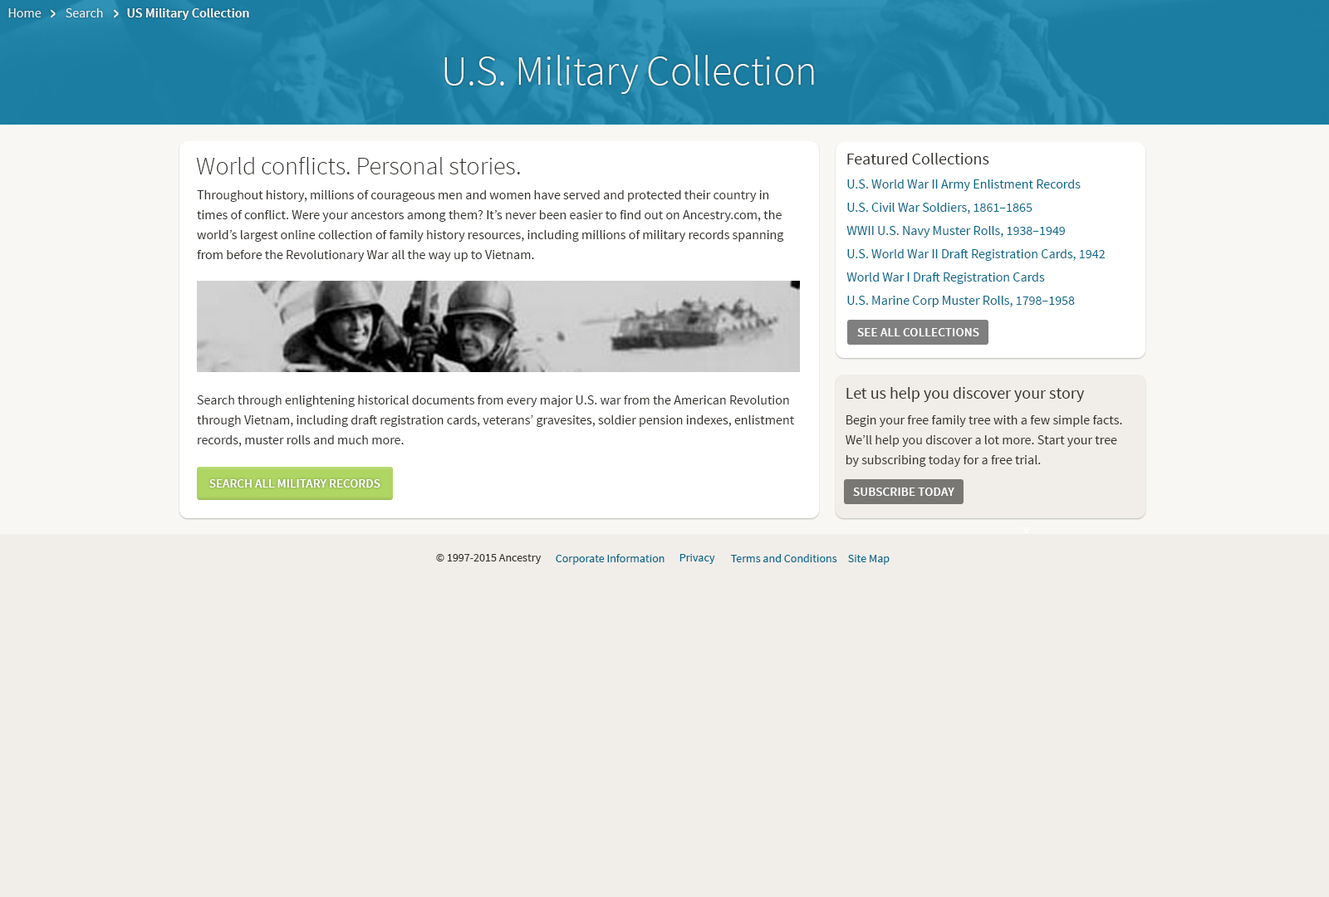
<style>
.page{position:relative;width:1329px;height:897px;background:#f1eeea}
.page>*{position:absolute;margin:0}
.t1{font:13.3px "SourceSansPro-Regular";color:#f8f7f3}
.t2{font:13.3px "SourceSansPro-Semibold";color:#f8f7f3}
.t3{font:41.5px "SourceSansPro-Light";color:#f8f7f3}
.t4{font:24.9px "SourceSansPro-Light";color:#36322d}
.t5{font:16.6px "SourceSansPro-Regular";color:#36322d}
.t6{font:13.3px/19.9px "SourceSansPro-Regular";color:#03678b}
.t7{font:13.3px/19.9px "SourceSansPro-Regular";color:#36322d}
.t8{font:12.5px "SourceSansPro-Semibold";letter-spacing:0.01em;color:#ffffff}
.t9{font:12.5px "SourceSansPro-Semibold";color:#ffffff}
.t10{font:11.6px "SourceSansPro-Regular";color:#36322d}
.t11{font:11.6px "SourceSansPro-Regular";color:#03678b}
</style>
<div class="page">
<p class="t1" style="left:8px;top:8px;width:34px;height:9px;opacity:0.9">Home</p>
<p class="t1" style="left:66px;top:8px;width:37px;height:9px;opacity:0.9">Search</p>
<p class="t2" style="left:127px;top:8px;width:122px;height:12px">US Military Collection</p>
<p class="t3" style="left:444px;top:55px;width:370px;height:39px">U.S. Military Collection</p>
<p class="t4" style="left:196px;top:157px;width:324px;height:17px">World conflicts. Personal stories.</p>
<p class="t5" style="left:847px;top:153px;width:142px;height:11px">Featured Collections</p>
<p class="t6" style="left:846px;top:179px;width:260px;height:128px">U.S. World War II Army Enlistment Records<br>U.S. Civil War Soldiers, 1861–1865<br>WWII U.S. Navy Muster Rolls, 1938–1949<br>U.S. World War II Draft Registration Cards, 1942<br>World War I Draft Registration Cards<br>U.S. Marine Corp Muster Rolls, 1798–1958</p>
<p class="t7" style="left:197px;top:190px;width:587px;height:72px">Throughout history, millions of courageous men and women have served and protected their country in times of conflict. Were your ancestors among them? It’s never been easier to find out on Ancestry.com, the world’s largest online collection of family history resources, including millions of military records spanning from before the Revolutionary War all the way up to Vietnam.</p>
<p class="t8" style="left:857px;top:328px;width:122px;height:8px">SEE ALL COLLECTIONS</p>
<p class="t5" style="left:846px;top:387px;width:239px;height:15px">Let us help you discover your story</p>
<p class="t7" style="left:197px;top:395px;width:597px;height:52px">Search through enlightening historical documents from every major U.S. war from the American Revolution through Vietnam, including draft registration cards, veterans’ gravesites, soldier pension indexes, enlistment records, muster rolls and much more.</p>
<p class="t7" style="left:846px;top:415px;width:276px;height:52px">Begin your free family tree with a few simple facts. We’ll help you discover a lot more. Start your tree by subscribing today for a free trial.</p>
<p class="t9" style="left:209px;top:479px;width:171px;height:9px">SEARCH ALL MILITARY RECORDS</p>
<p class="t8" style="left:853px;top:488px;width:101px;height:8px">SUBSCRIBE TODAY</p>
<p class="t8" style="left:1023px;top:527px;width:7px;height:6px">v</p>
<p class="t10" style="left:436px;top:554px;width:106px;height:10px">© 1997-2015 Ancestry</p>
<p class="t11" style="left:556px;top:554px;width:109px;height:11px">Corporate Information</p>
<p class="t11" style="left:680px;top:554px;width:35px;height:10px">Privacy</p>
<p class="t11" style="left:731px;top:554px;width:106px;height:8px">Terms and Conditions</p>
<p class="t11" style="left:848px;top:555px;width:42px;height:10px">Site Map</p>
</div>
